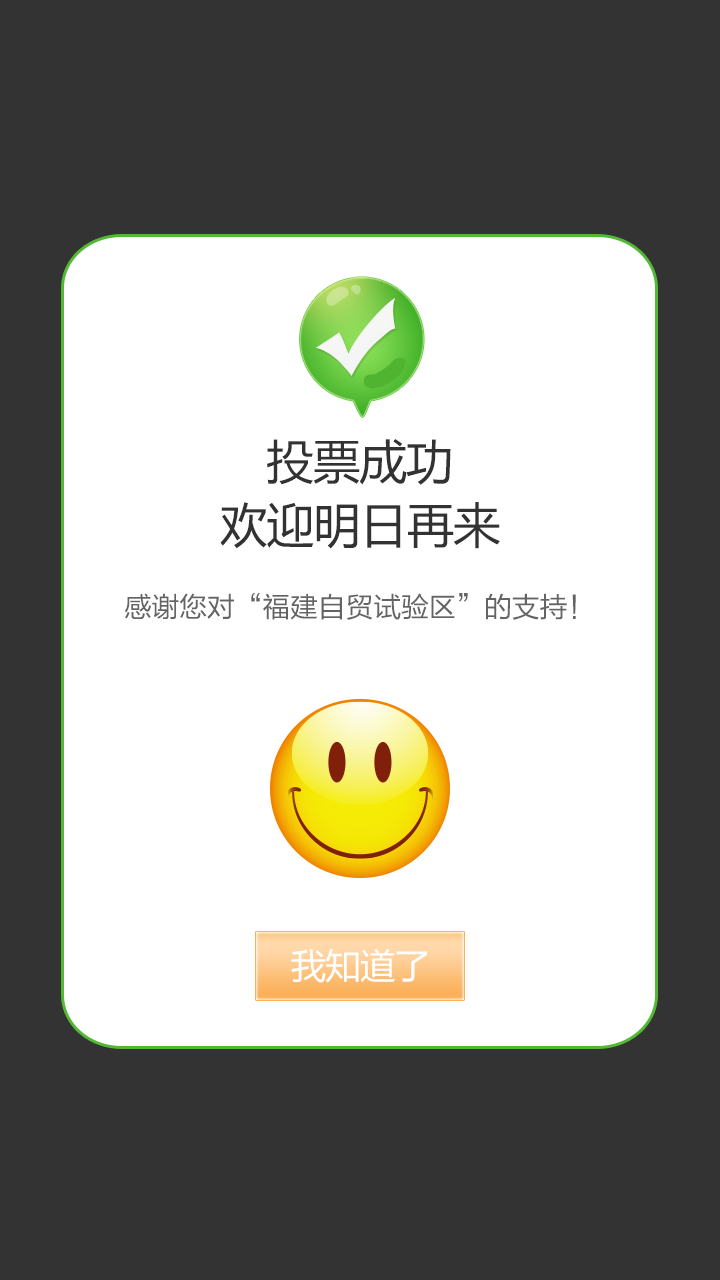
<style>
.page{position:relative;width:720px;height:1280px;background:#333333}
.page>*{position:absolute;margin:0}
.t1{font:47.2px "MicrosoftYaHei";letter-spacing:-0.01em;color:#323232}
.t2{font:47.6px "MicrosoftYaHei";letter-spacing:-0.01em;color:#323232}
.t3{font:28px "FZLTHK--GBK1-0";letter-spacing:-0.01em;color:#646464}
.t4{font:35px "MicrosoftYaHei";letter-spacing:-0.01em;color:#ffffff}
</style>
<div class="page">
<p class="t1" style="left:267px;top:439px;width:184px;height:46px">投票成功</p>
<p class="t2" style="left:220px;top:502px;width:280px;height:47px">欢迎明日再来</p>
<p class="t3" style="left:125px;top:592px;width:451px;height:28px">感谢您对“福建自贸试验区”的支持！</p>
<p class="t4" style="left:291px;top:948px;width:136px;height:35px">我知道了</p>
</div>
